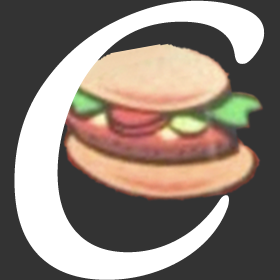
<style>
.page{position:relative;width:280px;height:280px;background:#333333}
.page>*{position:absolute;margin:0}
.t1{font:390.5px "Charm-Regular";color:#ffffff;scale:1.31 1}
</style>
<div class="page">
<p class="t1" style="left:14px;top:0px;width:251px;height:280px">C</p>
</div>
